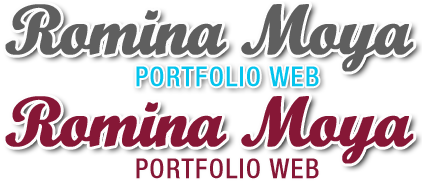
<style>
.page{position:relative;width:422px;height:189px;background:#ffffff}
.page>*{position:absolute;margin:0}
.t1{font:70.1px "WrexhamScript";letter-spacing:-0.04em;color:#5f5f5f;font-weight:bold}
.t2{font:27px "HelveticaNeueLT-MediumCond";letter-spacing:0.05em;color:#04c4ed;text-transform:uppercase}
.t3{font:70.1px "WrexhamScript";letter-spacing:-0.04em;color:#861736;font-weight:bold}
.t4{font:27px "HelveticaNeueLT-MediumCond";letter-spacing:0.05em;color:#861736;text-transform:uppercase}
</style>
<div class="page">
<p class="t1" style="left:5px;top:4px;width:409px;height:68px">Romina Moya</p>
<p class="t2" style="left:136px;top:66px;width:183px;height:21px">portfolio web</p>
<p class="t3" style="left:5px;top:96px;width:409px;height:68px">Romina Moya</p>
<p class="t4" style="left:136px;top:158px;width:183px;height:21px">portfolio web</p>
</div>
